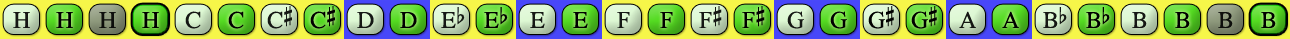
<style>
.page{position:relative;width:1290px;height:39px}
.page>*{position:absolute;margin:0}
.t1{font:24px "OpusChords";color:#000000}
.t2{font:24px "OpusChords";letter-spacing:-0.025em;color:#000000}
</style>
<div class="page">
<p class="t1" style="left:267px;top:6px;width:25px;height:23px;opacity:0.9">C#</p>
<p class="t1" style="left:310px;top:6px;width:25px;height:23px">C#</p>
<p class="t1" style="left:699px;top:6px;width:23px;height:22px;opacity:0.9">F#</p>
<p class="t1" style="left:742px;top:6px;width:23px;height:22px">F#</p>
<p class="t2" style="left:868px;top:6px;width:26px;height:23px">G#</p>
<p class="t2" style="left:911px;top:6px;width:26px;height:23px">G#</p>
<p class="t1" style="left:13px;top:12px;width:17px;height:16px;opacity:0.9">H</p>
<p class="t1" style="left:56px;top:12px;width:17px;height:16px">H</p>
<p class="t1" style="left:99px;top:12px;width:17px;height:16px;opacity:0.9">H</p>
<p class="t1" style="left:142px;top:12px;width:17px;height:16px">H</p>
<p class="t1" style="left:185px;top:11px;width:16px;height:18px;opacity:0.9">C</p>
<p class="t1" style="left:228px;top:11px;width:16px;height:18px">C</p>
<p class="t1" style="left:357px;top:12px;width:17px;height:16px;opacity:0.9">D</p>
<p class="t1" style="left:400px;top:12px;width:17px;height:16px">D</p>
<p class="t1" style="left:441px;top:7px;width:24px;height:21px;opacity:0.9">Eb</p>
<p class="t1" style="left:484px;top:7px;width:24px;height:21px">Eb</p>
<p class="t1" style="left:530px;top:12px;width:15px;height:16px;opacity:0.9">E</p>
<p class="t1" style="left:573px;top:12px;width:15px;height:16px">E</p>
<p class="t1" style="left:617px;top:12px;width:13px;height:16px;opacity:0.9">F</p>
<p class="t1" style="left:660px;top:12px;width:13px;height:16px">F</p>
<p class="t1" style="left:787px;top:11px;width:17px;height:18px;opacity:0.9">G</p>
<p class="t1" style="left:830px;top:11px;width:17px;height:18px">G</p>
<p class="t1" style="left:959px;top:11px;width:17px;height:17px;opacity:0.9">A</p>
<p class="t1" style="left:1002px;top:11px;width:17px;height:17px">A</p>
<p class="t1" style="left:1043px;top:7px;width:24px;height:21px;opacity:0.9">Bb</p>
<p class="t1" style="left:1086px;top:7px;width:24px;height:21px">Bb</p>
<p class="t1" style="left:1132px;top:12px;width:15px;height:16px;opacity:0.9">B</p>
<p class="t1" style="left:1175px;top:12px;width:15px;height:16px">B</p>
<p class="t1" style="left:1218px;top:12px;width:15px;height:16px;opacity:0.9">B</p>
<p class="t1" style="left:1261px;top:12px;width:15px;height:16px">B</p>
</div>
